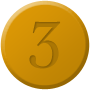
<style>
.page{position:relative;width:90px;height:90px;background:#ffffff}
.page>*{position:absolute;margin:0}
.t1{font:70px "Cochin";color:#a87404}
</style>
<div class="page">
<p class="t1" style="left:29px;top:21px;width:32px;height:48px">3</p>
</div>
